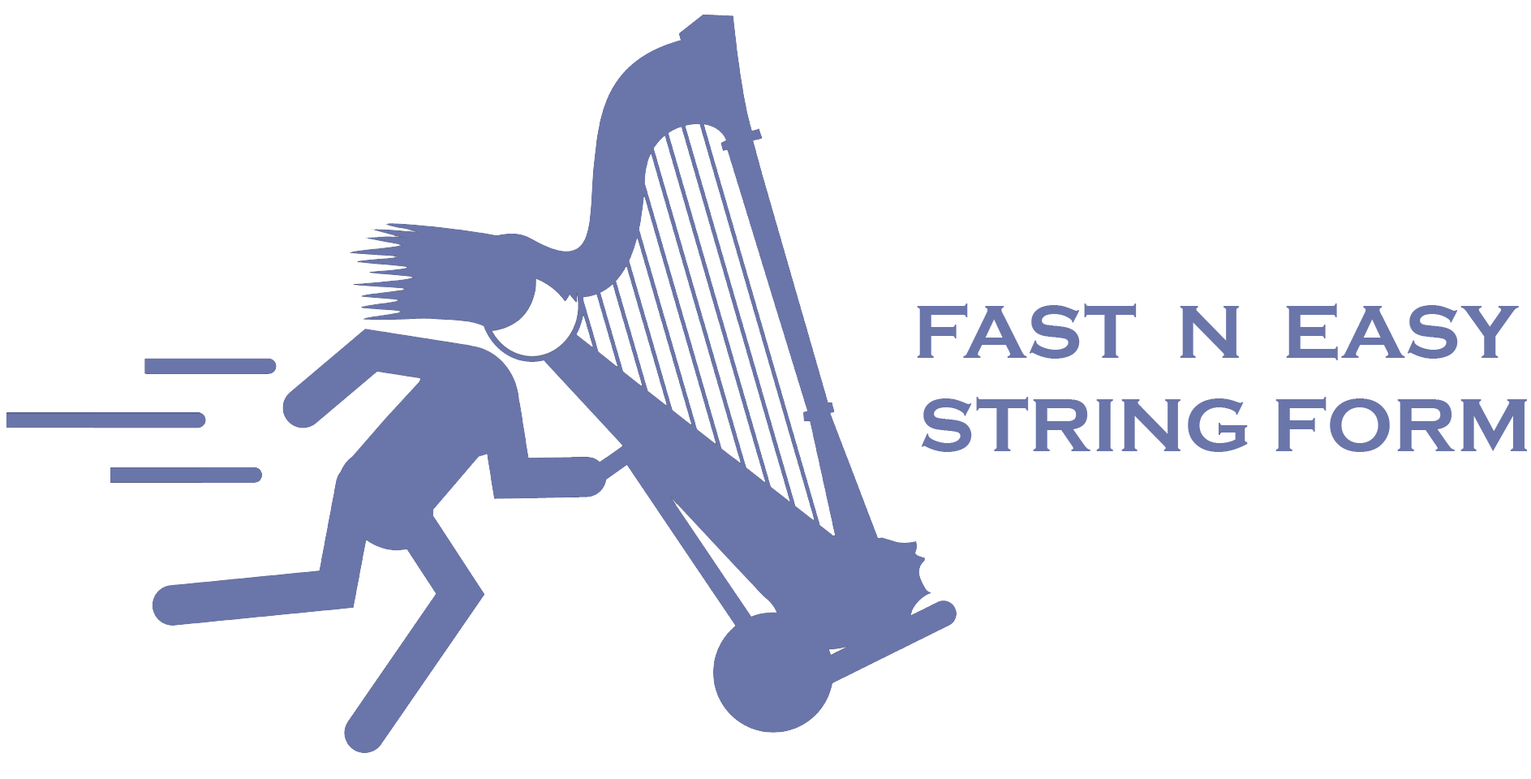
<style>
.page{position:relative;width:1531px;height:779px;background:#ffffff}
.page>*{position:absolute;margin:0}
.t1{font:77.9px "CopperplateGothic-Bold";color:#6a75aa}
</style>
<div class="page">
<p class="t1" style="left:917px;top:303px;width:610px;height:149px;text-align:center">FAST  N  EASY <br>STRING FORM</p>
</div>
